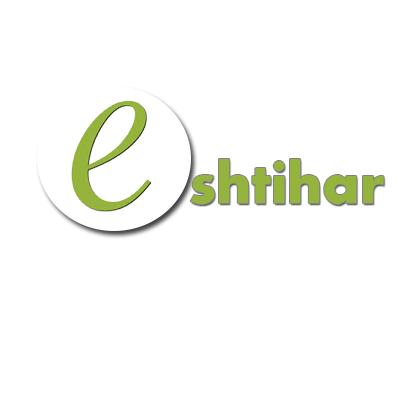
<style>
.page{position:relative;width:400px;height:400px;background:#ffffff}
.page>*{position:absolute;margin:0}
.t1{font:60px "Aharoni-Bold";color:#95b43d}
</style>
<div class="page">
<p class="t1" style="left:190px;top:159px;width:194px;height:45px">shtihar</p>
</div>
